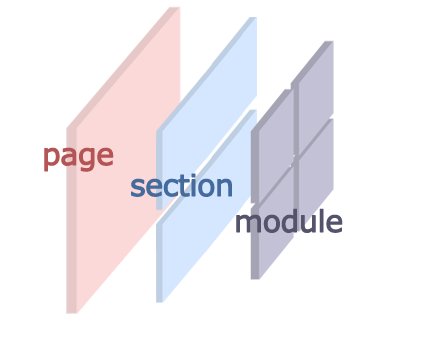
<style>
.page{position:relative;width:432px;height:339px;background:#ffffff}
.page>*{position:absolute;margin:0}
.t1{font:30px "Verdana";letter-spacing:-0.04em;color:#b45454;font-weight:bold}
.t2{font:30px "Verdana";letter-spacing:-0.04em;color:#456b9d;font-weight:bold}
.t3{font:30px "Verdana";letter-spacing:-0.04em;color:#54536c;font-weight:bold}
</style>
<div class="page">
<p class="t1" style="left:44px;top:147px;width:70px;height:25px">page</p>
<p class="t2" style="left:131px;top:173px;width:101px;height:24px">section</p>
<p class="t3" style="left:236px;top:208px;width:107px;height:25px">module</p>
</div>
